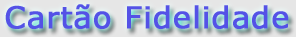
<style>
.page{position:relative;width:296px;height:37px}
.page>*{position:absolute;margin:0}
.t1{font:30px "Verdana";letter-spacing:0.02em;color:#5452e6;font-weight:bold}
</style>
<div class="page">
<p class="t1" style="left:5px;top:4px;width:284px;height:25px">Cartão Fidelidade</p>
</div>
